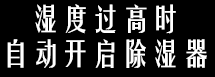
<style>
.page{position:relative;width:215px;height:77px;background:#000000}
.page>*{position:absolute;margin:0}
.t1{font:29.2px "FZYTK--GBK1-0";color:#ffffff;font-weight:bold}
</style>
<div class="page">
<p class="t1" style="left:7px;top:4px;width:200px;height:64px;text-align:center">湿度过高时<br>自动开启除湿器</p>
</div>
